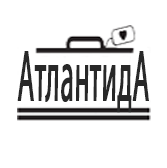
<style>
.page{position:relative;width:167px;height:168px;background:#ffffff}
.page>*{position:absolute;margin:0}
.t1{font:73px "MyriadPro-Regular";color:#282828;font-weight:bold;scale:0.38 1}
</style>
<div class="page">
<p class="t1" style="left:17px;top:51px;width:132px;height:62px">АтлантидА</p>
</div>
